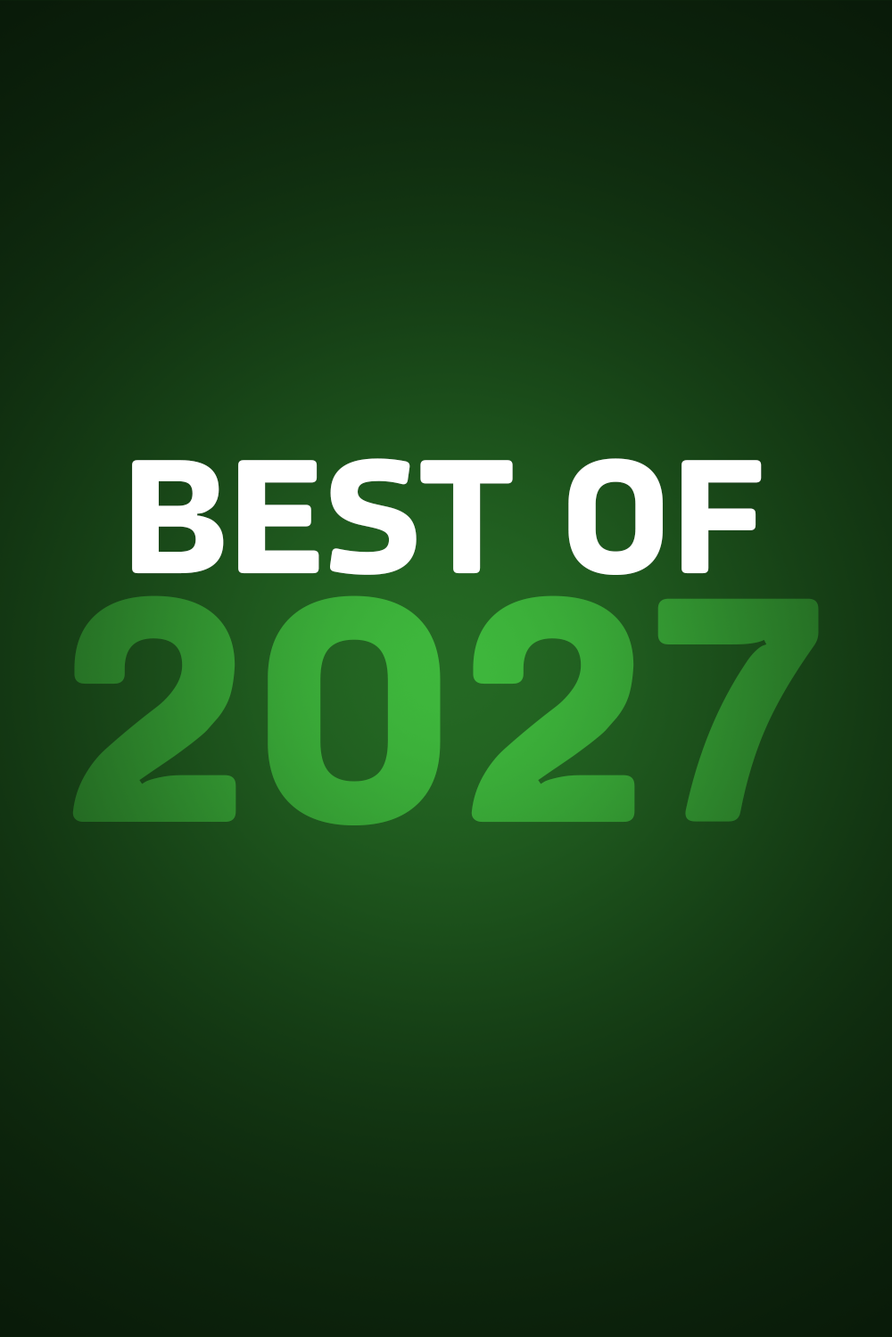
<style>
.page{position:relative;width:892px;height:1337px}
.page>*{position:absolute;margin:0}
.t1{font:161.8px "Amfibia-Bold";color:#ffffff;scale:1.03 1}
.t2{font:323.6px "Amfibia-Bold";scale:1.03 1}
</style>
<div class="page">
<p class="t1" style="left:132px;top:458px;width:629px;height:117px">BEST OF</p>
<p class="t2" style="left:72px;top:596px;width:746px;height:230px">2027</p>
</div>
